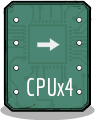
<style>
.page{position:relative;width:95px;height:120px;background:#4a8673}
.page>*{position:absolute;margin:0}
.t1{font:24px "Economica-Regular";color:#ffffff}
</style>
<div class="page">
<p class="t1" style="left:27px;top:78px;width:46px;height:18px">CPUx4</p>
</div>
